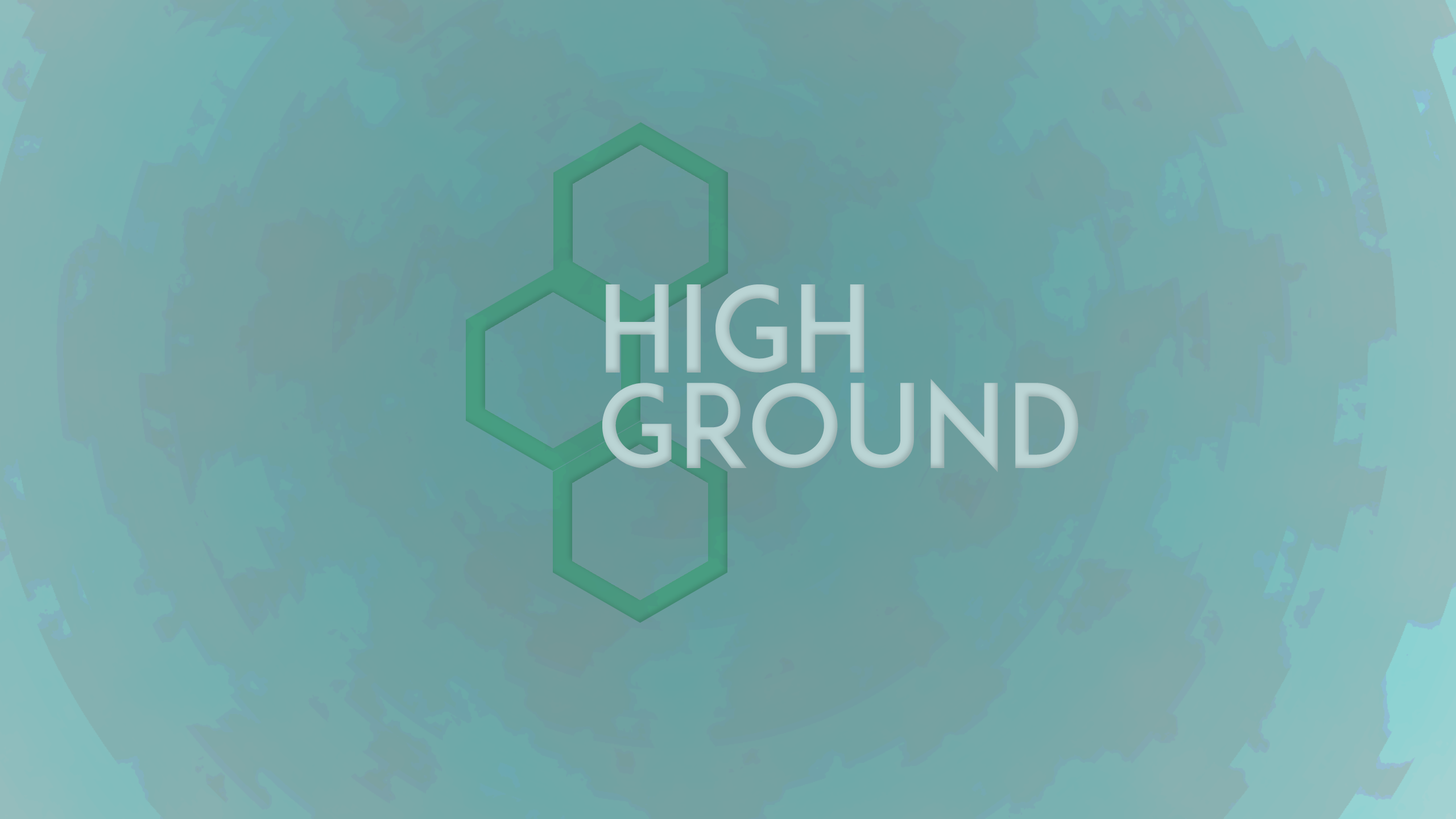
<style>
.page{position:relative;width:1456px;height:819px}
.page>*{position:absolute;margin:0}
.t1{font:114.6px "ADAM.CGPRO";color:#bad4d4}
.t2{font:118.6px "ADAM.CGPRO";color:#bad4d4}
</style>
<div class="page">
<p class="t1" style="left:602px;top:284px;width:476px;height:188px"><span class="t2">High </span>Ground</p>
</div>
